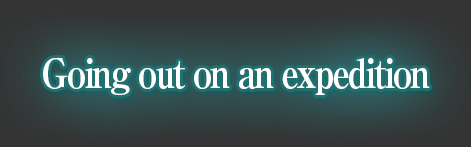
<style>
.page{position:relative;width:471px;height:147px}
.page>*{position:absolute;margin:0}
.t1{font:40px "RyuminPro-ExBold";letter-spacing:-0.08em;color:#ffffff;scale:0.9 1}
</style>
<div class="page">
<p class="t1" style="left:43px;top:57px;width:387px;height:38px">Going out on an expedition</p>
</div>
